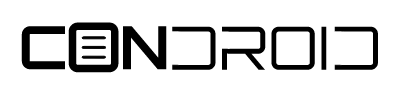
<style>
.page{position:relative;width:400px;height:95px;background:#ffffff}
.page>*{position:absolute;margin:0}
.t1{font:59.9px "Orbitron-Bold";color:#000000}
.t2{font:69px "Orbitron-Medium";color:#000000;text-transform:uppercase}
.t3{font:59.9px "Orbitron-Regular";color:#000000}
</style>
<div class="page">
<p class="t1" style="left:21px;top:26px;width:146px;height:44px">C   N</p>
<p class="t2" style="left:68px;top:22px;width:51px;height:51px">o</p>
<p class="t3" style="left:172px;top:26px;width:206px;height:44px">DROID</p>
</div>
